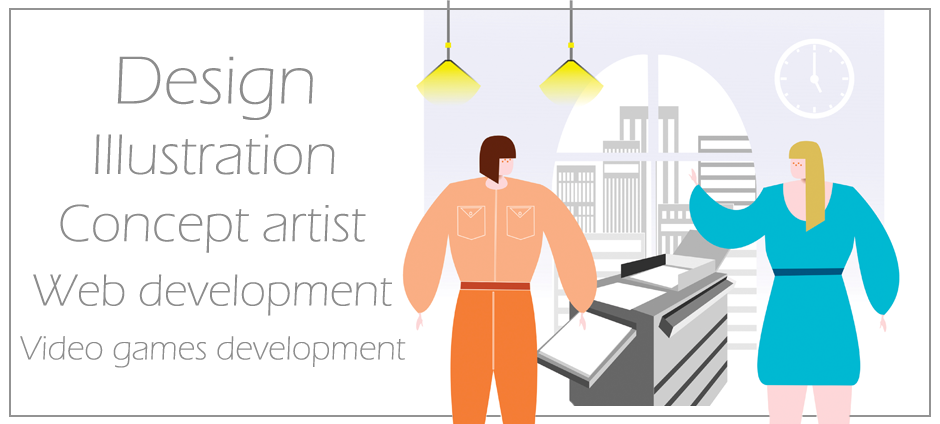
<style>
.page{position:relative;width:940px;height:424px;background:#ffffff}
.page>*{position:absolute;margin:0}
.t1{font:70px "ErasITC-Light";color:#8c8c8c}
.t2{font:58.9px "ErasITC-Light";color:#8c8c8c}
.t3{font:54px "ErasITC-Light";color:#8c8c8c}
.t4{font:46.2px "ErasITC-Light";color:#8c8c8c}
.t5{font:34.4px "ErasITC-Light";color:#8c8c8c}
</style>
<div class="page">
<p class="t1" style="left:117px;top:56px;width:196px;height:64px">Design</p>
<p class="t2" style="left:95px;top:134px;width:240px;height:41px">Illustration</p>
<p class="t3" style="left:60px;top:204px;width:306px;height:49px">Concept artist</p>
<p class="t4" style="left:33px;top:274px;width:359px;height:42px">Web development</p>
<p class="t5" style="left:20px;top:336px;width:386px;height:32px">Video games development</p>
</div>
